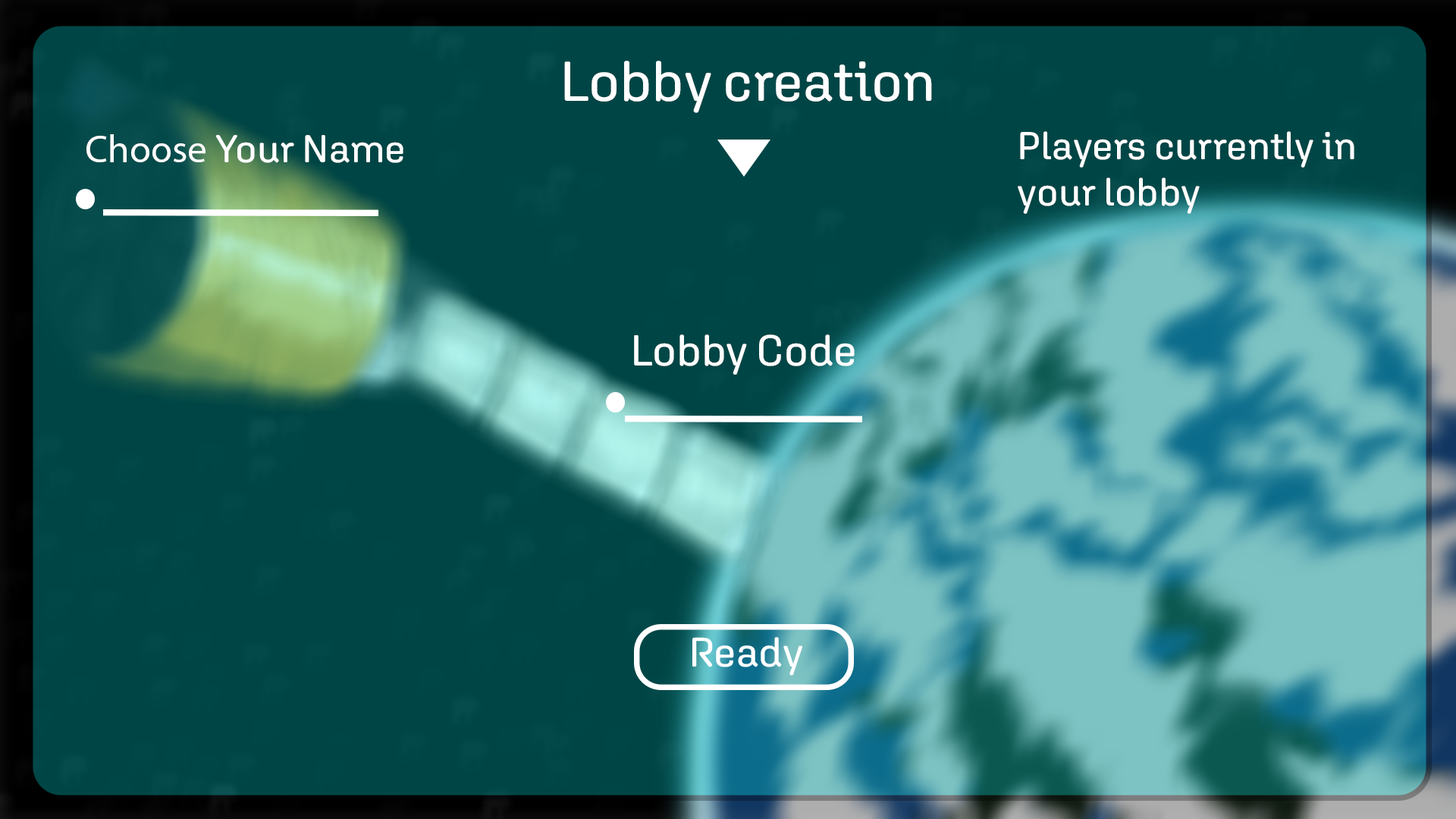
<style>
.page{position:relative;width:1456px;height:819px;background:#004545}
.page>*{position:absolute;margin:0}
.t1{font:56.2px "AgletSansVF_465.000wght_0ital";color:#ffffff}
.t2{font:38.9px "AgletSansVF_465.000wght_0ital";color:#ffffff}
.t3{font:43.3px "AgletSansVF_465.000wght_0ital";color:#ffffff}
</style>
<div class="page">
<p class="t1" style="left:564px;top:61px;width:368px;height:52px">Lobby creation</p>
<p class="t2" style="left:86px;top:134px;width:317px;height:29px">Choose</p>
<p class="t2" style="left:1018px;top:131px;width:336px;height:83px">Players currently in your lobby</p>
<p class="t3" style="left:634px;top:334px;width:221px;height:41px">Lobby Code</p>
</div>
